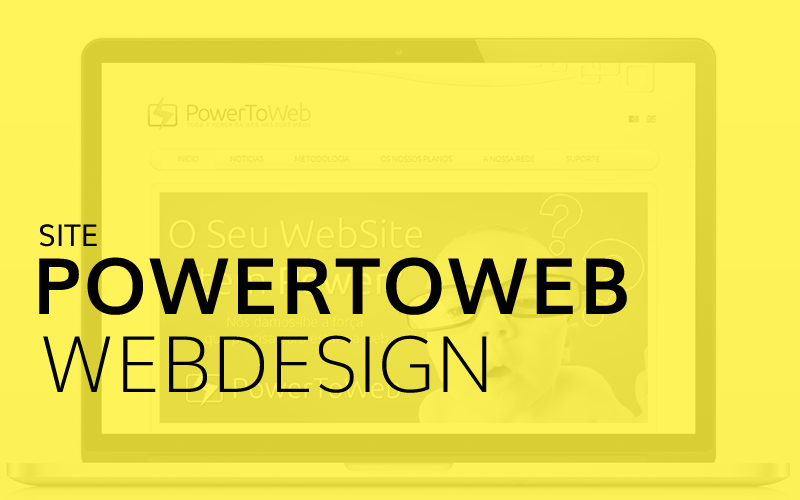
<style>
.page{position:relative;width:800px;height:500px;background:#fef45a}
.page>*{position:absolute;margin:0}
.t1{font:30px "Muli";letter-spacing:-0.01em;color:#010101;text-transform:uppercase}
.t2{font:78px "Muli-Bold";letter-spacing:0.025em;color:#010101;text-transform:uppercase}
.t3{font:78px "Muli-ExtraLight";letter-spacing:-0.01em;color:#010101;text-transform:uppercase}
</style>
<div class="page">
<p class="t1" style="left:40px;top:224px;width:57px;height:23px">site</p>
<p class="t2" style="left:39px;top:257px;width:588px;height:58px">PowerToWeb</p>
<p class="t3" style="left:43px;top:335px;width:444px;height:58px">WebDesign</p>
</div>
